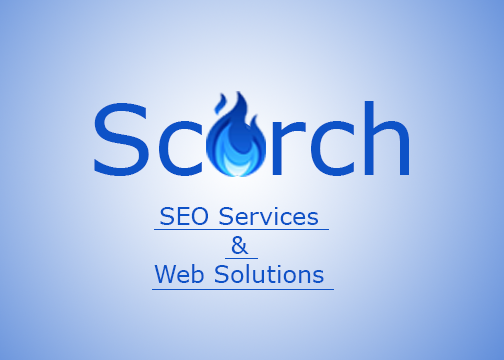
<style>
.page{position:relative;width:504px;height:360px}
.page>*{position:absolute;margin:0}
.t1{font:97.4px "Verdana";color:#0d52c7}
.t2{font:24px "Verdana";color:#0d52c7}
</style>
<div class="page">
<p class="t1" style="left:94px;top:101px;width:315px;height:75px">Scorch</p>
<p class="t2" style="left:154px;top:207px;width:170px;height:76px;text-align:center">SEO Services<br>&amp;<br>Web Solutions</p>
</div>
